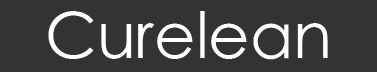
<style>
.page{position:relative;width:377px;height:72px;background:#333333}
.page>*{position:absolute;margin:0}
.t1{font:63.5px "STHeitiSC-Light";color:#ffffff}
</style>
<div class="page">
<p class="t1" style="left:48px;top:11px;width:280px;height:49px">Curelean</p>
</div>
